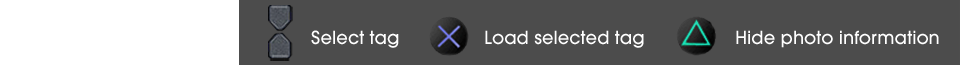
<style>
.page{position:relative;width:960px;height:65px;background:#4c4c4c}
.page>*{position:absolute;margin:0}
.t1{font:18px "ITCAvantGardeStd-Md";color:#ffffff}
</style>
<div class="page">
<p class="t1" style="left:311px;top:30px;width:88px;height:18px">Select tag</p>
<p class="t1" style="left:485px;top:30px;width:159px;height:18px">Load selected tag</p>
<p class="t1" style="left:736px;top:30px;width:203px;height:18px">Hide photo information</p>
</div>
